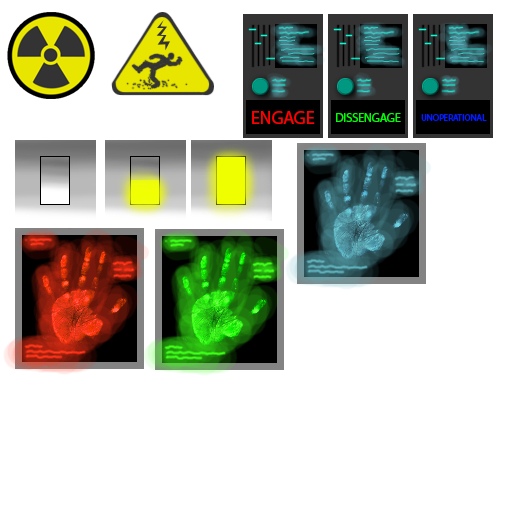
<style>
.page{position:relative;width:512px;height:512px;background:#ffffff}
.page>*{position:absolute;margin:0}
.t1{font:18px "MyriadPro-Regular";color:#fe0000}
.t2{font:12px "MyriadPro-Regular";color:#00fe06}
.t3{font:9px "MyriadPro-Regular";color:#001efe}
</style>
<div class="page">
<p class="t1" style="left:252px;top:111px;width:63px;height:13px">ENGAGE</p>
<p class="t2" style="left:336px;top:113px;width:65px;height:9px">DISSENGAGE</p>
<p class="t3" style="left:421px;top:114px;width:66px;height:7px">UNOPERATIONAL</p>
</div>
